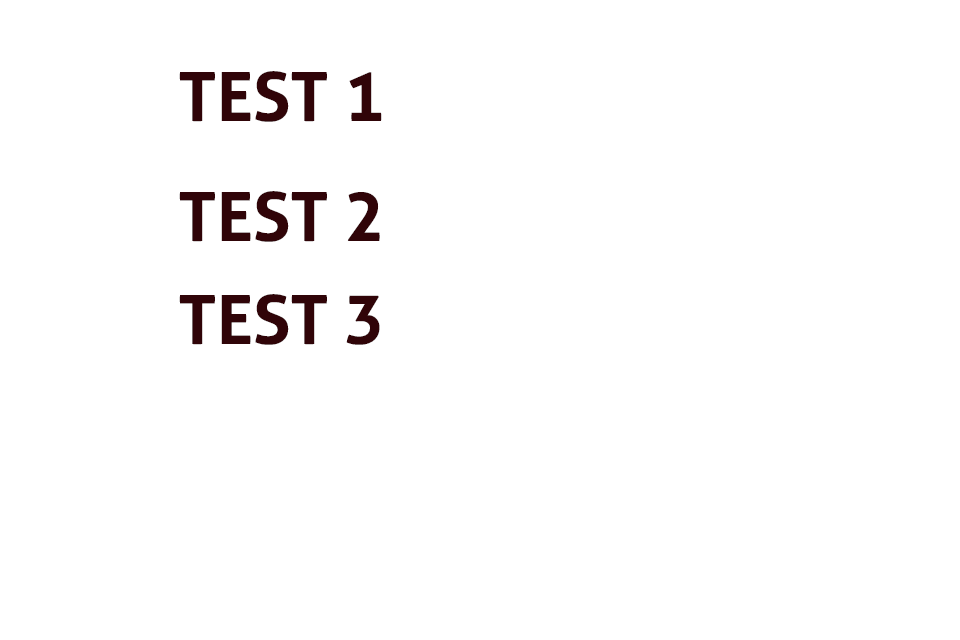
<style>
.page{position:relative;width:960px;height:640px;background:#ffffff}
.page>*{position:absolute;margin:0}
.t1{font:68.2px "Aller-Bold";color:#300408}
</style>
<div class="page">
<p class="t1" style="left:179px;top:71px;width:203px;height:51px">TEST 1</p>
<p class="t1" style="left:179px;top:191px;width:201px;height:51px">TEST 2</p>
<p class="t1" style="left:179px;top:294px;width:201px;height:51px">TEST 3</p>
</div>
